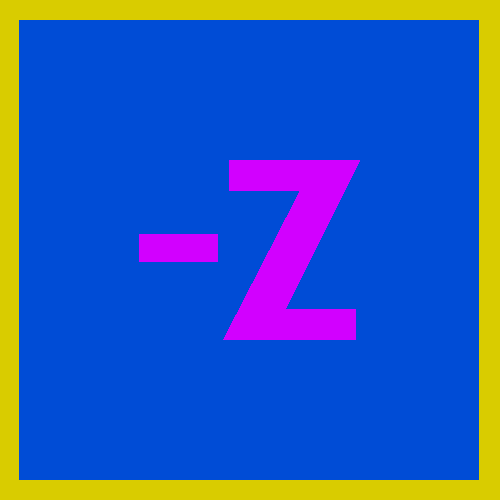
<style>
.page{position:relative;width:500px;height:500px;background:#004cd6}
.page>*{position:absolute;margin:0}
.t1{font:353px "Futura-CondensedMedium";color:#d200ff;scale:1.25 1}
</style>
<div class="page">
<p class="t1" style="left:139px;top:160px;width:221px;height:180px">-z</p>
</div>
